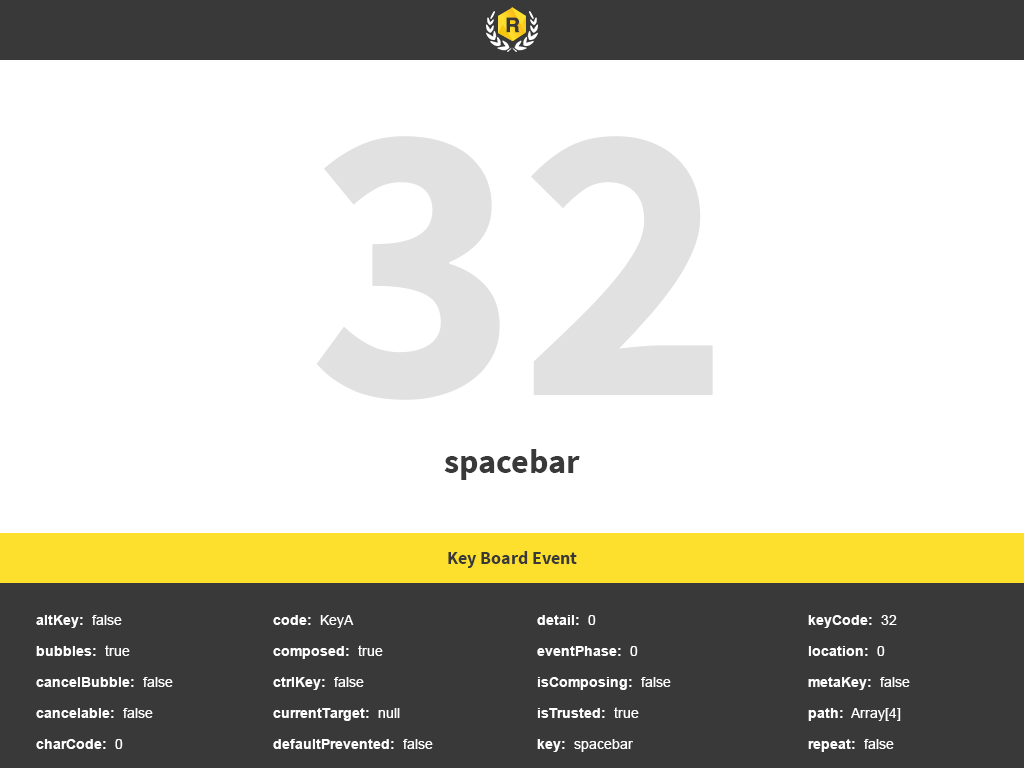
<style>
.page{position:relative;width:1024px;height:768px;background:#ffffff}
.page>*{position:absolute;margin:0}
.t1{font:400px "SourceSansPro-Bold";color:#e1e1e1}
.t2{font:34px "SourceSansPro-Bold";color:#393939}
.t3{font:18px "SourceSansPro-Bold";color:#393939}
.t4{font:14px "Arial-BoldMT";color:#ffffff}
.t5{font:14px "ArialMT";color:#ffffff}
</style>
<div class="page">
<p class="t1" style="left:316px;top:136px;width:397px;height:264px">32</p>
<p class="t2" style="left:444px;top:449px;width:136px;height:31px">spacebar</p>
<p class="t3" style="left:448px;top:551px;width:129px;height:17px">Key Board Event</p>
<p class="t4" style="left:36px;top:615px;width:86px;height:13px">altKey:<span class="t5">  false</span></p>
<p class="t4" style="left:273px;top:615px;width:81px;height:13px">code:<span class="t5">  KeyA</span></p>
<p class="t4" style="left:537px;top:615px;width:59px;height:10px">detail:<span class="t5">  0</span></p>
<p class="t4" style="left:808px;top:615px;width:89px;height:13px">keyCode:<span class="t5">  32</span></p>
<p class="t4" style="left:36px;top:645px;width:94px;height:11px">bubbles:<span class="t5">  true</span></p>
<p class="t4" style="left:273px;top:645px;width:110px;height:14px">composed:<span class="t5">  true</span></p>
<p class="t4" style="left:537px;top:646px;width:101px;height:10px">eventPhase:<span class="t5">  0</span></p>
<p class="t4" style="left:808px;top:646px;width:77px;height:10px">location:<span class="t5">  0</span></p>
<p class="t4" style="left:36px;top:677px;width:137px;height:10px">cancelBubble:<span class="t5">  false</span></p>
<p class="t4" style="left:273px;top:677px;width:91px;height:13px">ctrlKey:<span class="t5">  false</span></p>
<p class="t4" style="left:537px;top:677px;width:134px;height:13px">isComposing:<span class="t5">  false</span></p>
<p class="t4" style="left:808px;top:677px;width:102px;height:13px">metaKey:<span class="t5">  false</span></p>
<p class="t4" style="left:36px;top:708px;width:117px;height:10px">cancelable:<span class="t5">  false</span></p>
<p class="t4" style="left:273px;top:708px;width:127px;height:13px">currentTarget:<span class="t5">  null</span></p>
<p class="t4" style="left:537px;top:707px;width:102px;height:11px">isTrusted:<span class="t5">  true</span></p>
<p class="t5" style="left:808px;top:708px;width:93px;height:13px"><span class="t4">path:</span>  Array[4]</p>
<p class="t4" style="left:36px;top:739px;width:87px;height:10px">charCode:<span class="t5">  0</span></p>
<p class="t4" style="left:273px;top:739px;width:160px;height:10px">defaultPrevented:<span class="t5">  false</span></p>
<p class="t5" style="left:537px;top:739px;width:96px;height:13px"><span class="t4">key:</span>  spacebar</p>
<p class="t4" style="left:808px;top:739px;width:86px;height:13px">repeat:<span class="t5">  false</span></p>
</div>
